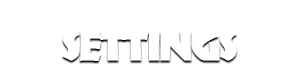
<style>
.page{position:relative;width:300px;height:80px;background:#ffffff}
.page>*{position:absolute;margin:0}
.t1{font:41.5px "Informal011BT-Roman";letter-spacing:-0.06em;color:#ffffff;font-weight:bold}
</style>
<div class="page">
<p class="t1" style="left:62px;top:30px;width:175px;height:31px">SETTINGs</p>
</div>
